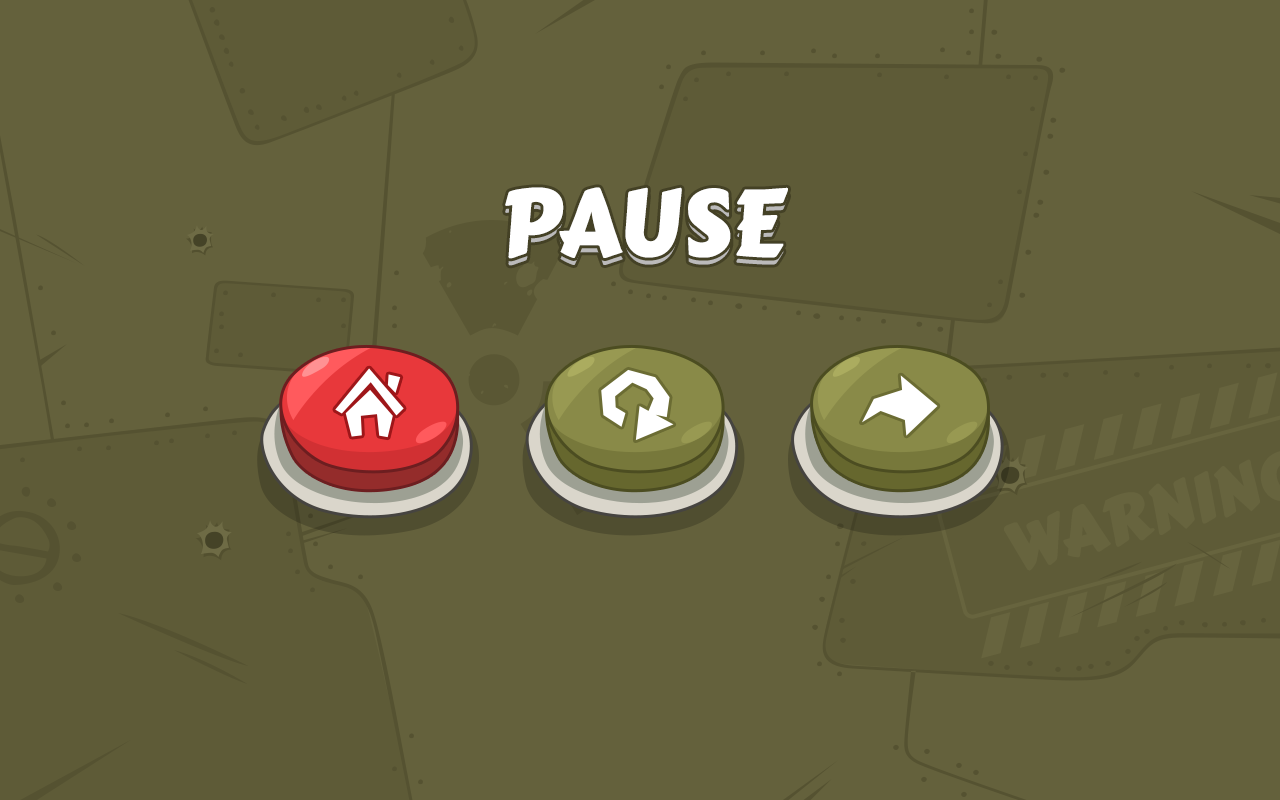
<style>
.page{position:relative;width:1280px;height:800px;background:#64613c}
.page>*{position:absolute;margin:0}
.t1{font:93.4px "CarterOne";color:#ffffff;text-transform:uppercase}
</style>
<div class="page">
<p class="t1" style="left:505px;top:194px;width:283px;height:72px">PAUSE</p>
<p class="t1" style="left:505px;top:187px;width:283px;height:72px">PAUSE</p>
</div>
